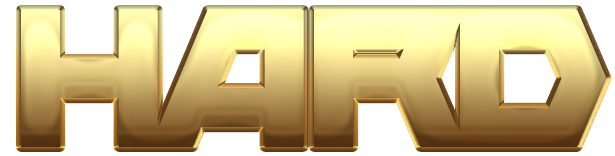
<style>
.page{position:relative;width:615px;height:156px;background:#ffffff}
.page>*{position:absolute;margin:0}
.t1{font:200px "Diagon"}
</style>
<div class="page">
<p class="t1" style="left:21px;top:10px;width:586px;height:137px">HARD</p>
</div>
